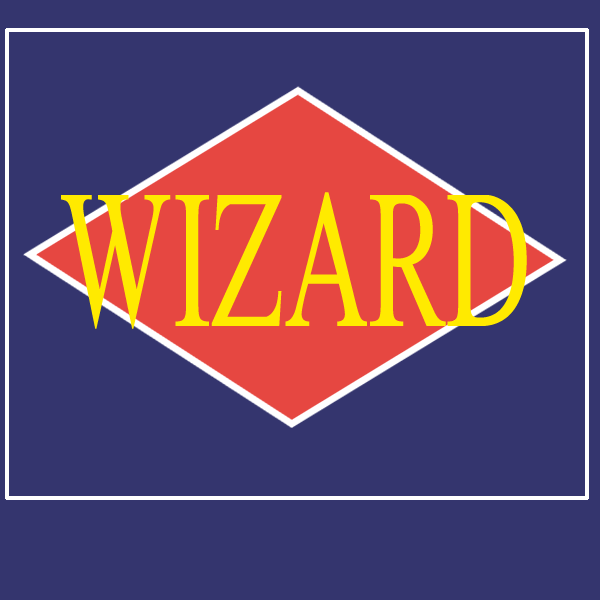
<style>
.page{position:relative;width:600px;height:600px;background:#34356e}
.page>*{position:absolute;margin:0}
.t1{font:197.9px "OpusPlainChords";color:#ffea00;scale:0.59 1}
</style>
<div class="page">
<p class="t1" style="left:61px;top:192px;width:466px;height:137px">WIZARD</p>
</div>
